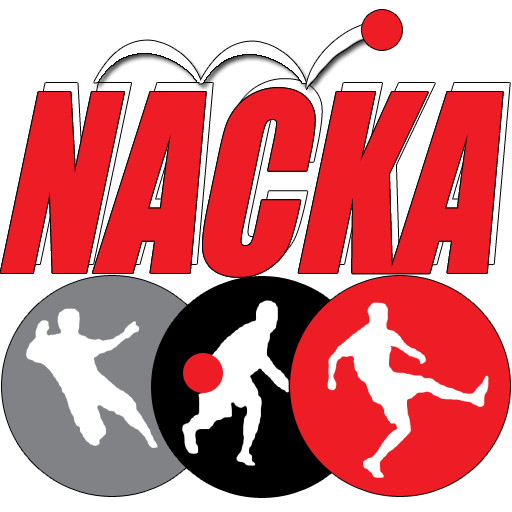
<style>
.page{position:relative;width:512px;height:512px;background:#ffffff}
.page>*{position:absolute;margin:0}
.t1{font:233.6px "Impact";color:#ee1c25;scale:0.8 1}
</style>
<div class="page">
<p class="t1" style="left:0px;top:88px;width:503px;height:189px">NACKA</p>
<p class="t1" style="left:0px;top:88px;width:503px;height:189px">NACKA</p>
<p class="t1" style="left:7px;top:79px;width:503px;height:189px">NACKA</p>
</div>
